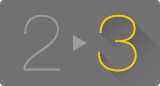
<style>
.page{position:relative;width:160px;height:86px;background:#727272}
.page>*{position:absolute;margin:0}
.t1{font:80px "HelveticaNeueLTStd-UltLt";color:#999999}
.t2{font:80px "HelveticaNeueLTStd-UltLt";color:#f7ca00}
</style>
<div class="page">
<p class="t1" style="left:23px;top:14px;width:38px;height:57px">2</p>
<p class="t2" style="left:98px;top:14px;width:39px;height:58px">3</p>
</div>
